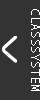
<style>
.page{position:relative;width:40px;height:100px;background:#333333}
.page>*{position:absolute;margin:0}
.t1{font:13.7px "OperatorMono-Light";color:#ffffff}
</style>
<div class="page">
<p class="t1" style="left:31px;top:9px;width:9px;height:82px;rotate:90deg">CLASSSYSTEM</p>
</div>
